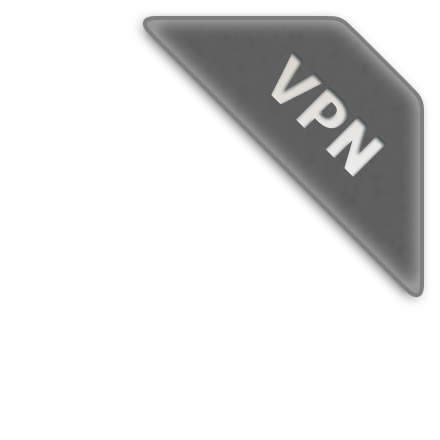
<style>
.page{position:relative;width:440px;height:440px;background:#ffffff}
.page>*{position:absolute;margin:0}
.t1{font:64px "mplus-1p-black";color:#e0dbd6}
</style>
<div class="page">
<p class="t1" style="left:271px;top:51px;width:116px;height:126px;rotate:45deg">VPN</p>
</div>
